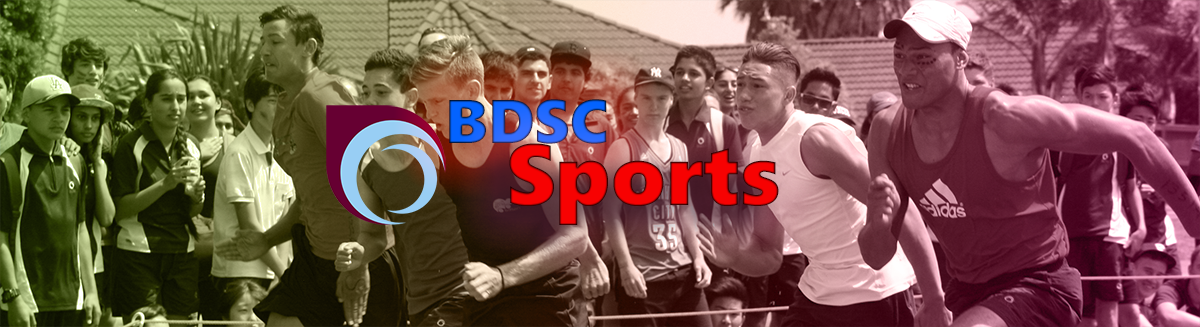
<style>
.page{position:relative;width:1200px;height:327px}
.page>*{position:absolute;margin:0}
.t1{font:61.6px "SegoeUIBlack"}
.t2{font:86.6px "SegoeUIBlack";color:#f70202}
</style>
<div class="page">
<p class="t1" style="left:449px;top:99px;width:158px;height:45px">BDSC</p>
<p class="t2" style="left:509px;top:143px;width:270px;height:82px">Sports</p>
</div>
